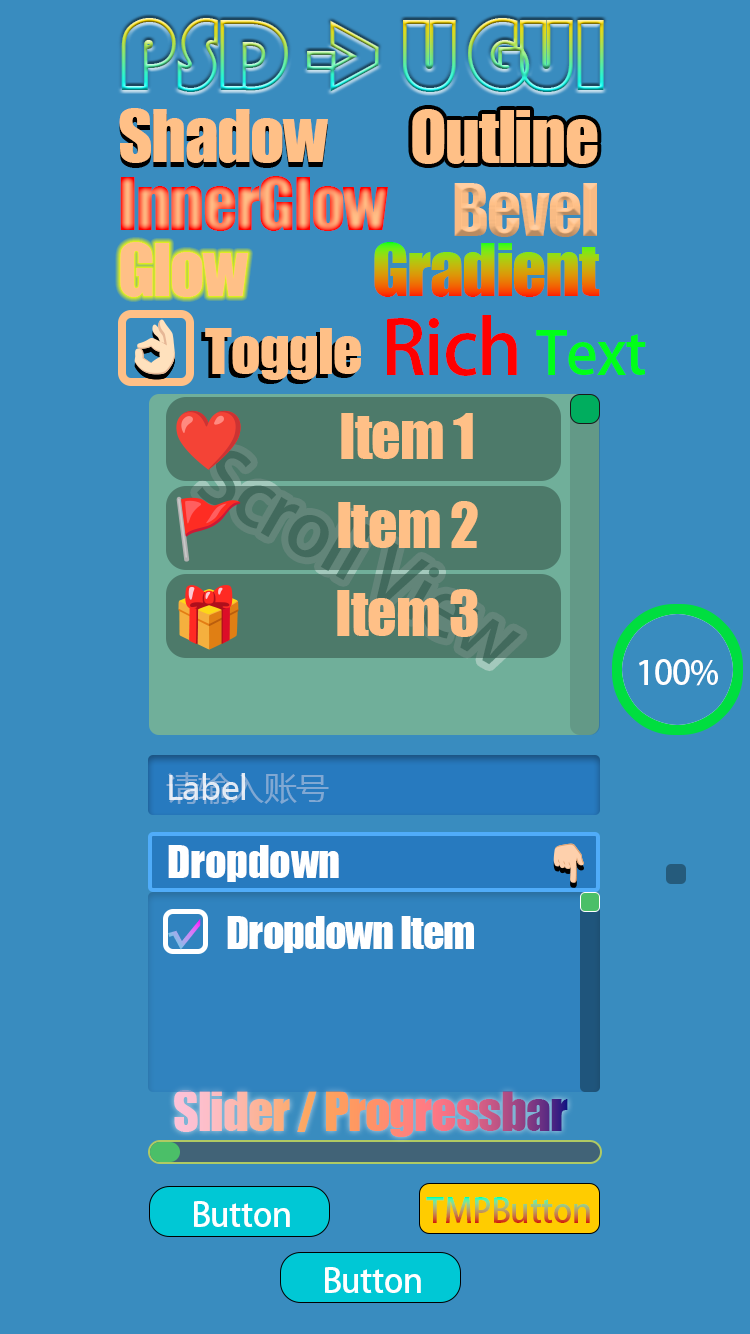
<style>
.page{position:relative;width:750px;height:1334px;background:#398cbf}
.page>*{position:absolute;margin:0}
.t1{font:66.7px "Impact";letter-spacing:-0.02em;color:#ffc087}
.t2{font:66.7px "Impact";letter-spacing:-0.02em}
.t3{font:75px "AdobeHeitiStd-Regular";letter-spacing:-0.02em;color:#ff0000}
.t4{font:58.3px "AdobeHeitiStd-Regular";letter-spacing:-0.02em;color:#00ff18}
.t5{font:58.3px "Impact";letter-spacing:-0.02em;color:#ffc087}
.t6{font:33.3px "AdobeHeitiStd-Regular";letter-spacing:-0.02em;color:#ffffff}
.t7{font:33.3px "MicrosoftYaHeiUI";letter-spacing:-0.02em;color:#80a8d3}
.t8{font:33.3px "MicrosoftYaHeiUI";letter-spacing:-0.02em;color:#e3ebf4}
.t9{font:41.7px "Impact";color:#ffffff}
.t10{font:41.7px "Impact";letter-spacing:-0.02em;color:#ffffff}
.t11{font:50px "Impact";letter-spacing:-0.02em}
.t12{font:33.3px "AdobeHeitiStd-Regular";letter-spacing:-0.02em}
</style>
<div class="page">
<p class="t1" style="left:119px;top:108px;width:209px;height:55px">Shadow</p>
<p class="t1" style="left:412px;top:109px;width:186px;height:55px">Outline</p>
<p class="t2" style="left:120px;top:176px;width:268px;height:55px">InnerGlow</p>
<p class="t1" style="left:454px;top:183px;width:143px;height:54px">Bevel</p>
<p class="t1" style="left:120px;top:242px;width:128px;height:55px">Glow</p>
<p class="t2" style="left:374px;top:242px;width:226px;height:55px">Gradient</p>
<p class="t3" style="left:387px;top:315px;width:259px;height:61px">Rich <span class="t4">Text</span></p>
<p class="t5" style="left:205px;top:328px;width:156px;height:52px">Toggle</p>
<p class="t5" style="left:341px;top:413px;width:132px;height:46px">Item 1</p>
<p class="t5" style="left:338px;top:501px;width:140px;height:47px">Item 2</p>
<p class="t5" style="left:337px;top:589px;width:141px;height:48px">Item 3</p>
<p class="t6" style="left:639px;top:659px;width:79px;height:27px">100%</p>
<p class="t7" style="left:166px;top:772px;width:163px;height:32px">请输入账号</p>
<p class="t8" style="left:169px;top:773px;width:76px;height:27px">Label</p>
<p class="t9" style="left:168px;top:845px;width:171px;height:37px">Dropdown</p>
<p class="t10" style="left:227px;top:916px;width:247px;height:37px">Dropdown Item</p>
<p class="t11" style="left:174px;top:1090px;width:394px;height:47px">Slider / Progressbar</p>
<p class="t6" style="left:194px;top:1201px;width:96px;height:26px">Button</p>
<p class="t12" style="left:426px;top:1197px;width:164px;height:26px">TMPButton</p>
<p class="t6" style="left:325px;top:1267px;width:96px;height:26px">Button</p>
</div>
